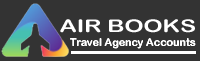
<style>
.page{position:relative;width:200px;height:61px;background:#333333}
.page>*{position:absolute;margin:0}
.t1{font:17.4px "ArialRoundedMTBold";color:#ffffff;scale:1.37 1}
.t2{font:10.7px "ArialRoundedMTBold";color:#ffffff}
</style>
<div class="page">
<p class="t1" style="left:60px;top:19px;width:135px;height:14px">AIR BOOKS</p>
<p class="t2" style="left:70px;top:38px;width:126px;height:11px">Travel Agency Accounts</p>
</div>
